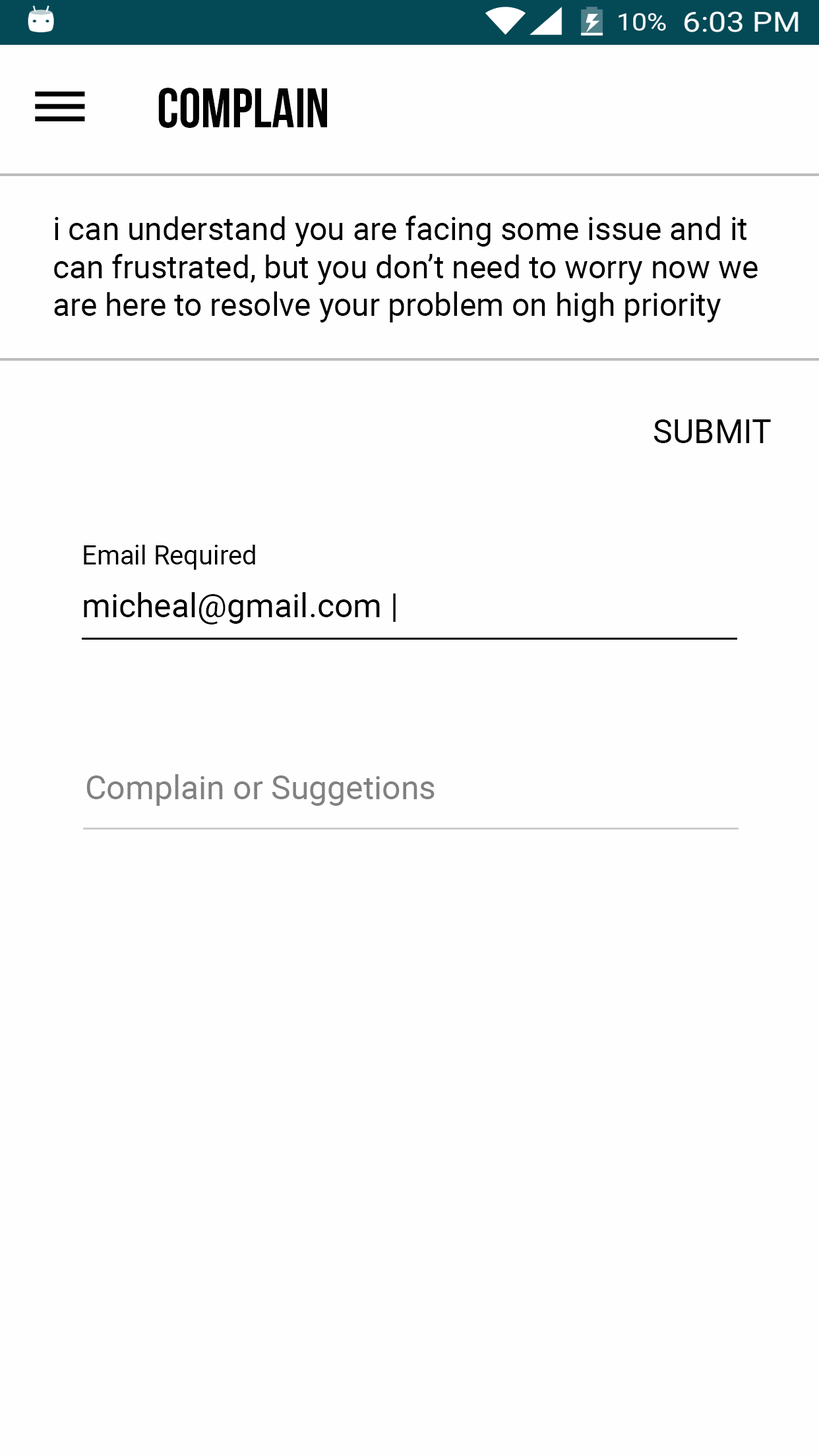
<style>
.page{position:relative;width:819px;height:1456px;background:#fefefe}
.page>*{position:absolute;margin:0}
.t1{font:56px "BebasNeueBold";color:#010101}
.t2{font:31.7px "Roboto-Regular";color:#000000}
.t3{font:33px "Roboto-Regular";color:#030303}
.t4{font:26.4px "Roboto-Regular";color:#000000}
.t5{font:33px "Roboto-Regular";color:#000000}
.t6{font:33px "Roboto-Regular";color:#828181}
</style>
<div class="page">
<p class="t1" style="left:158px;top:88px;width:169px;height:40px">COMPLAIN</p>
<p class="t2" style="left:54px;top:216px;width:704px;height:106px">i can understand you are facing some issue and it <br>can frustrated, but you don’t need to worry now we <br>are here to resolve your problem on high priority</p>
<p class="t3" style="left:654px;top:419px;width:117px;height:24px">SUBMIT</p>
<p class="t4" style="left:84px;top:545px;width:171px;height:25px">Email Required</p>
<p class="t5" style="left:84px;top:592px;width:312px;height:32px">micheal@gmail.com |</p>
<p class="t6" style="left:86px;top:774px;width:349px;height:32px">Complain or Suggetions</p>
</div>
